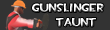
<style>
.page{position:relative;width:110px;height:30px;background:#333333}
.page>*{position:absolute;margin:0}
.t1{font:12px "TF2Build"}
</style>
<div class="page">
<p class="t1" style="left:32px;top:3px;width:72px;height:24px">Gunslinger<br>     Taunt</p>
</div>
